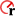
<style>
.page{position:relative;width:16px;height:16px;background:#ffffff}
.page>*{position:absolute;margin:0}
.t1{font:14.5px "TimesNewRomanPS-BoldMT";letter-spacing:0.08em;color:#000000}
</style>
<div class="page">
<p class="t1" style="left:9px;top:8px;width:6px;height:8px">r</p>
</div>
